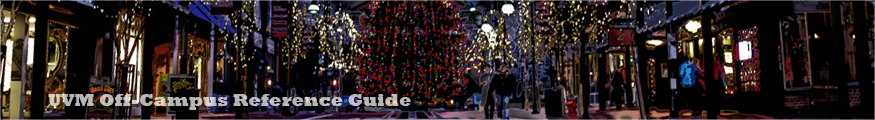
<style>
.page{position:relative;width:875px;height:120px}
.page>*{position:absolute;margin:0}
.t1{font:18px "Rockwell-ExtraBold";color:#b7b6b6}
</style>
<div class="page">
<p class="t1" style="left:48px;top:94px;width:363px;height:16px">UVM Off-Campus Reference Guide</p>
<p class="t1" style="left:48px;top:94px;width:363px;height:16px">UVM Off-Campus Reference Guide</p>
</div>
